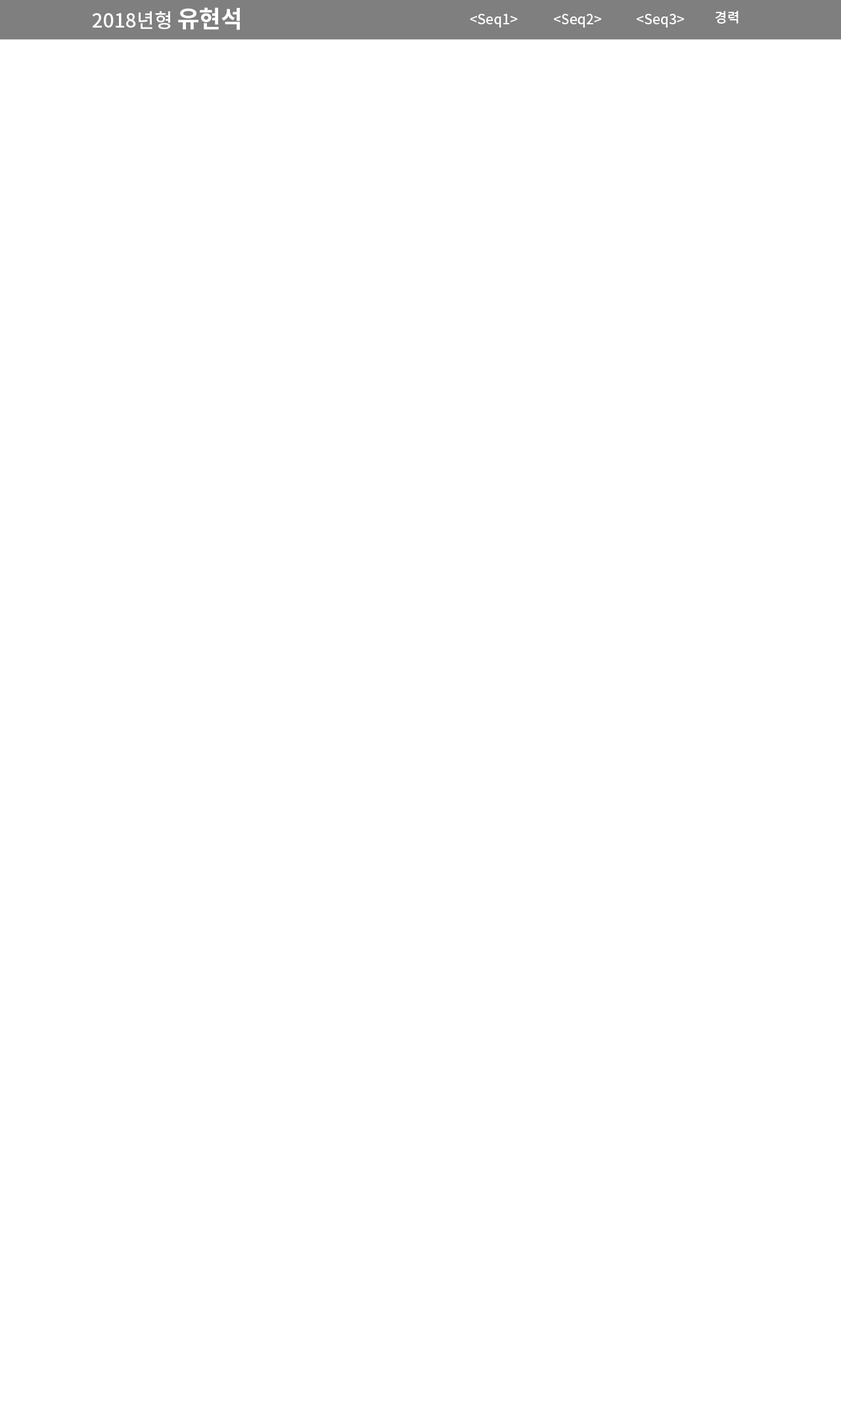
<style>
.page{position:relative;width:841px;height:1419px;background:#ffffff}
.page>*{position:absolute;margin:0}
.t1{font:19.7px "NotoSansCJKkr-Medium";color:#ffffff}
.t2{font:23.6px "NotoSansCJKkr-Bold";color:#ffffff}
.t3{font:13.8px "NotoSansCJKkr-Medium";color:#ffffff}
</style>
<div class="page">
<p class="t1" style="left:92px;top:7px;width:148px;height:23px">2018년형 <span class="t2">유현석</span></p>
<p class="t3" style="left:470px;top:14px;width:48px;height:14px">&lt;Seq1&gt;</p>
<p class="t3" style="left:554px;top:14px;width:47px;height:14px">&lt;Seq2&gt;</p>
<p class="t3" style="left:636px;top:14px;width:48px;height:14px">&lt;Seq3&gt;</p>
<p class="t3" style="left:715px;top:11px;width:23px;height:13px">경력</p>
</div>
